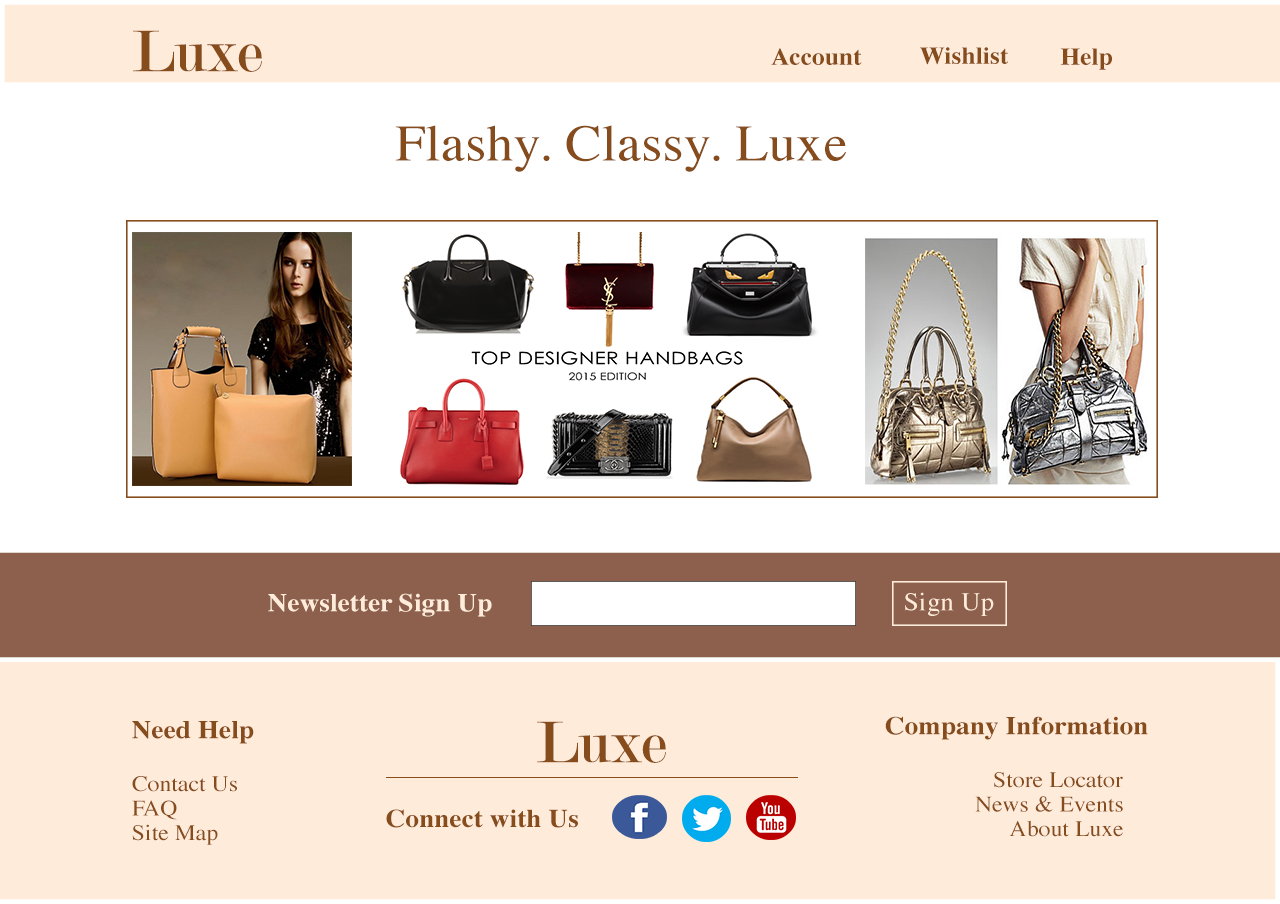
<style>
.page{position:relative;width:1280px;height:904px;background:#ffffff}
.page>*{position:absolute;margin:0}
.t1{font:62.7px "Modern-Regular";letter-spacing:0.005em;color:#874c1c}
.t2{font:23.9px "Times-Bold";letter-spacing:0.005em;color:#874c1c;scale:1.06 1}
.t3{font:51.3px "Times-Roman";letter-spacing:0.005em;color:#874c1c;scale:1.06 1}
.t4{font:25.7px "Times-Bold";letter-spacing:0.005em;color:#ffebd9;scale:1.06 1}
.t5{font:25.7px "Times-Roman";letter-spacing:0.005em;color:#ffebd9;scale:1.06 1}
.t6{font:22.2px "Times-Roman";letter-spacing:0.005em;color:#874c1c;scale:1.06 1}
.t7{font:25.7px "Times-Bold";letter-spacing:0.005em;color:#874c1c;scale:1.06 1}
</style>
<div class="page">
<p class="t1" style="left:133px;top:30px;width:129px;height:42px">Luxe</p>
<p class="t2" style="left:771px;top:48px;width:91px;height:17px">Account</p>
<p class="t2" style="left:920px;top:47px;width:89px;height:18px">Wishlist</p>
<p class="t2" style="left:1060px;top:48px;width:52px;height:22px">Help</p>
<p class="t3" style="left:395px;top:125px;width:451px;height:47px">Flashy. Classy. Luxe</p>
<p class="t4" style="left:268px;top:593px;width:224px;height:24px">Newsletter Sign Up</p>
<p class="t5" style="left:905px;top:592px;width:89px;height:24px">Sign Up</p>
<p class="t6" style="left:132px;top:721px;width:122px;height:124px"><span class="t7">Need Help<br><br></span>Contact Us<br>FAQ<br>Site Map</p>
<p class="t1" style="left:537px;top:721px;width:129px;height:42px">Luxe</p>
<p class="t6" style="left:885px;top:716px;width:263px;height:121px"><span class="t7">Company Information<br><br></span>   Store Locator<br>     News &amp; Events<br>      About Luxe</p>
<p class="t7" style="left:386px;top:809px;width:192px;height:19px">Connect with Us</p>
</div>
